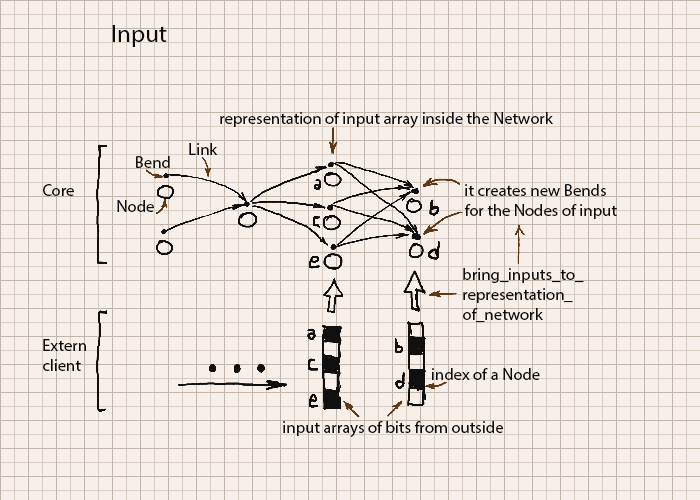
<style>
.page{position:relative;width:700px;height:500px;background:#f7f0ea}
.page>*{position:absolute;margin:0}
.t1{font:25px "MyriadPro-Regular";color:#0d0d0d}
.t2{font:16.7px "MyriadPro-Regular";color:#0d0d0d}
</style>
<div class="page">
<p class="t1" style="left:112px;top:25px;width:55px;height:22px">Input</p>
<p class="t2" style="left:220px;top:112px;width:333px;height:16px">representation of input array inside the Network</p>
<p class="t2" style="left:189px;top:143px;width:29px;height:12px">Link</p>
<p class="t2" style="left:136px;top:156px;width:34px;height:12px">Bend</p>
<p class="t2" style="left:43px;top:184px;width:31px;height:12px">Core</p>
<p class="t2" style="left:464px;top:184px;width:153px;height:35px">it creates new Bends <br>for the Nodes of input</p>
<p class="t2" style="left:117px;top:200px;width:37px;height:12px">Node</p>
<p class="t2" style="left:463px;top:268px;width:121px;height:55px">bring_inputs_to_<br>representation_<br>of_network</p>
<p class="t2" style="left:43px;top:339px;width:43px;height:32px">Extern <br>client</p>
<p class="t2" style="left:432px;top:368px;width:108px;height:12px">index of a Node</p>
<p class="t2" style="left:283px;top:421px;width:220px;height:16px">input arrays of bits from outside</p>
</div>
